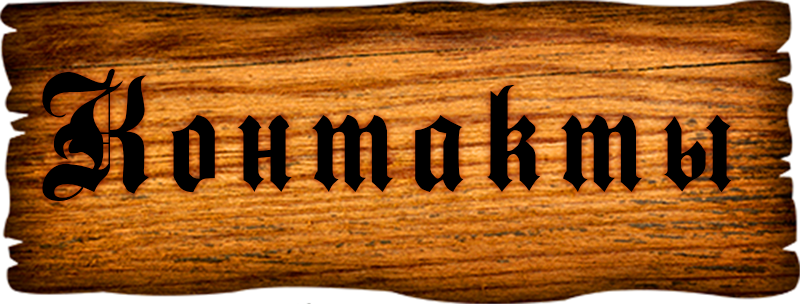
<style>
.page{position:relative;width:800px;height:304px}
.page>*{position:absolute;margin:0}
.t1{font:166.7px "BeckettRus";letter-spacing:0.095em;color:#000000}
</style>
<div class="page">
<p class="t1" style="left:42px;top:69px;width:690px;height:132px">Контакты</p>
</div>
